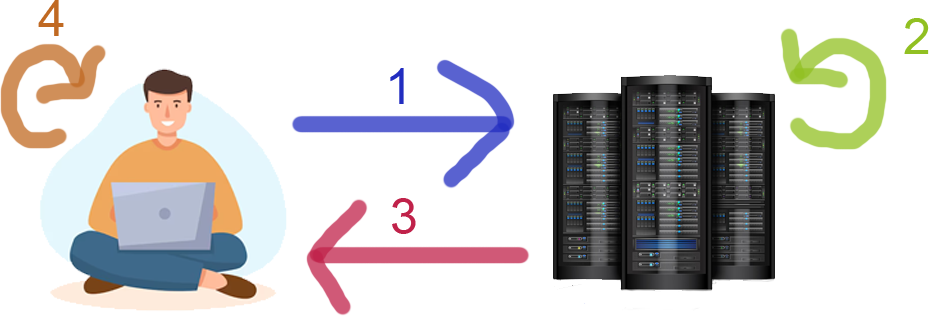
<style>
.page{position:relative;width:929px;height:316px;background:#ffffff}
.page>*{position:absolute;margin:0}
.t1{font:50px "ArialMT";letter-spacing:0.01em;color:#c06922}
.t2{font:50px "ArialMT";letter-spacing:0.01em;color:#91c022}
.t3{font:50px "ArialMT";letter-spacing:0.01em;color:#222dc0}
.t4{font:50px "ArialMT";letter-spacing:0.01em;color:#c0224a}
</style>
<div class="page">
<p class="t1" style="left:38px;top:0px;width:26px;height:36px">4</p>
<p class="t2" style="left:904px;top:18px;width:25px;height:36px">2</p>
<p class="t3" style="left:390px;top:68px;width:14px;height:36px">1</p>
<p class="t4" style="left:392px;top:198px;width:24px;height:36px">3</p>
</div>
